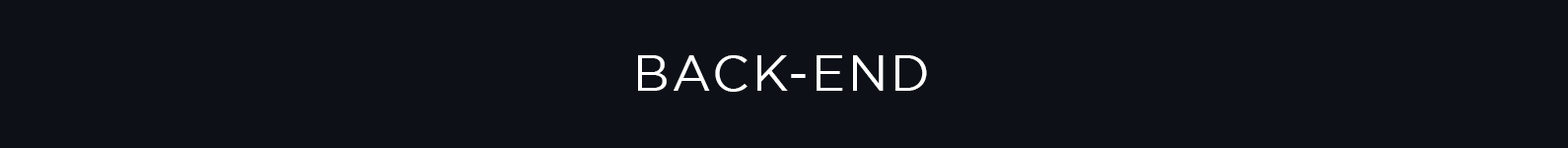
<style>
.page{position:relative;width:1568px;height:148px;background:#0d1117}
.page>*{position:absolute;margin:0}
.t1{font:50.3px "Gotham-Book";letter-spacing:0.05em;color:#ffffff;text-transform:uppercase}
</style>
<div class="page">
<p class="t1" style="left:638px;top:55px;width:289px;height:37px">back-end</p>
</div>
